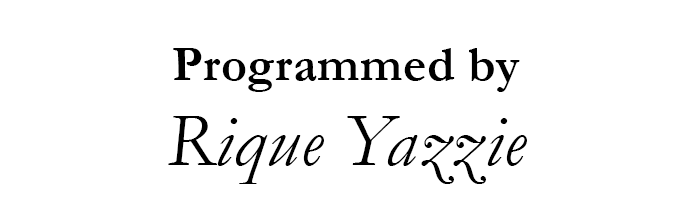
<style>
.page{position:relative;width:694px;height:223px;background:#ffffff}
.page>*{position:absolute;margin:0}
.t1{font:50px "Garamond-Bold";letter-spacing:0.01em;color:#000000}
.t2{font:76.4px "Garamond-Italic";letter-spacing:0.01em;color:#000000}
</style>
<div class="page">
<p class="t1" style="left:173px;top:48px;width:347px;height:44px">Programmed by</p>
<p class="t2" style="left:168px;top:116px;width:359px;height:68px">Rique Yazzie</p>
</div>
